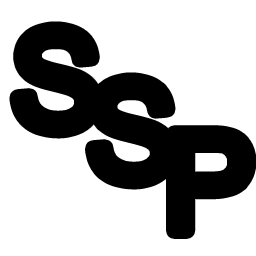
<style>
.page{position:relative;width:256px;height:256px;background:#ffffff}
.page>*{position:absolute;margin:0}
.t1{font:136.1px/51px "ArialMT";color:#000000}
.t2{font:136.1px/28.3px "ArialMT";color:#000000}
</style>
<div class="page">
<p class="t1" style="left:17px;top:29px;width:232px;height:202px;text-align:center"><span class="t2">S<br>   </span> S<br>        P</p>
</div>
